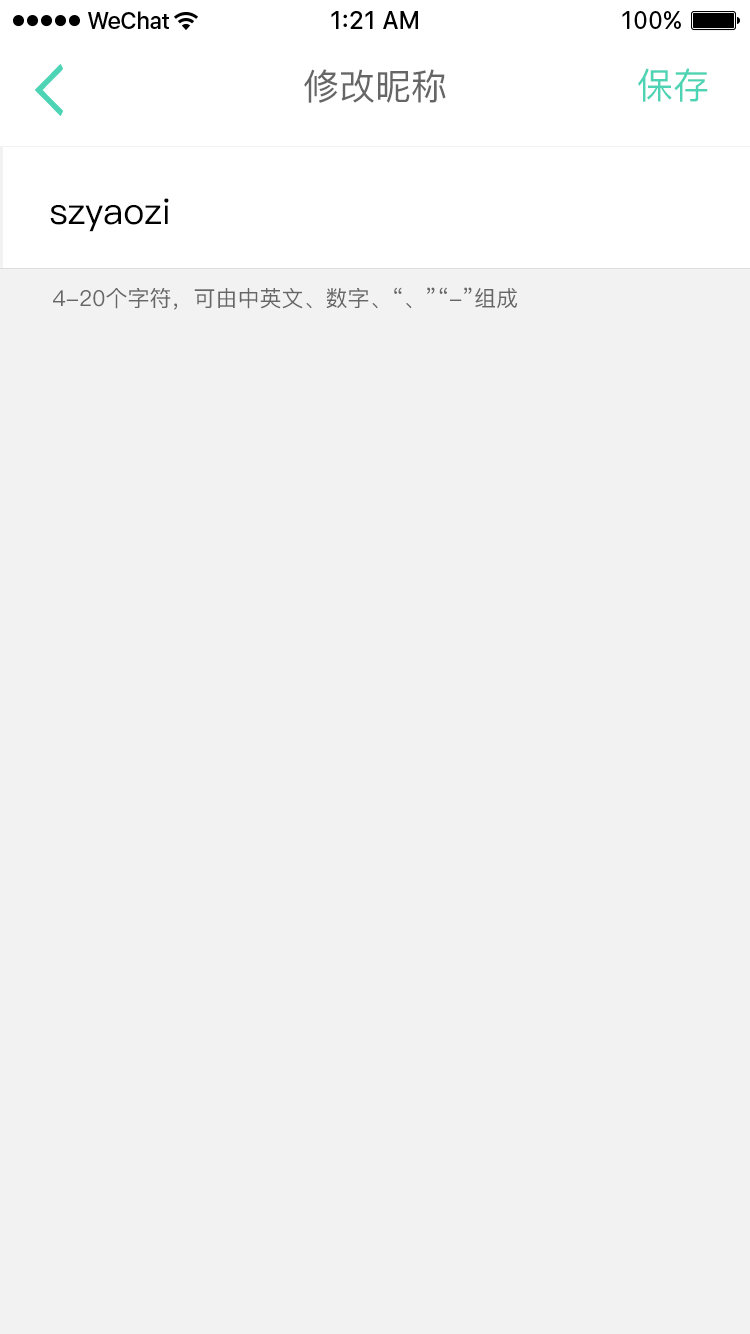
<style>
.page{position:relative;width:750px;height:1334px;background:#f2f2f2}
.page>*{position:absolute;margin:0}
.t1{font:36px "PingFang-SC-Medium";color:#666666}
.t2{font:36px "PingFang-SC-Medium";color:#4dd4b4}
.t3{font:36px "PingFang-SC-Medium";color:#000000}
.t4{font:22px "PingFang-SC-Medium";color:#666666}
</style>
<div class="page">
<p class="t1" style="left:304px;top:69px;width:142px;height:34px">修改昵称</p>
<p class="t2" style="left:638px;top:68px;width:70px;height:34px">保存</p>
<p class="t3" style="left:50px;top:198px;width:119px;height:34px">szyaozi</p>
<p class="t4" style="left:53px;top:287px;width:465px;height:23px">4-20个字符，可由中英文、数字、“、”“-”组成</p>
</div>
